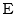
<style>
.page{position:relative;width:16px;height:16px;background:#ffffff}
.page>*{position:absolute;margin:0}
.t1{font:16px "BookmanOldStyle";color:#000000}
</style>
<div class="page">
<p class="t1" style="left:3px;top:3px;width:11px;height:11px">E</p>
</div>
